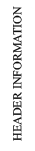
<style>
.page{position:relative;width:35px;height:151px;background:#ffffff}
.page>*{position:absolute;margin:0}
.t1{font:12px "TimesNewRomanPSMT";color:#0c0c0c}
</style>
<div class="page">
<p class="t1" style="left:13px;top:6px;width:9px;height:135px;rotate:-90deg">HEADER INFORMATION</p>
</div>
